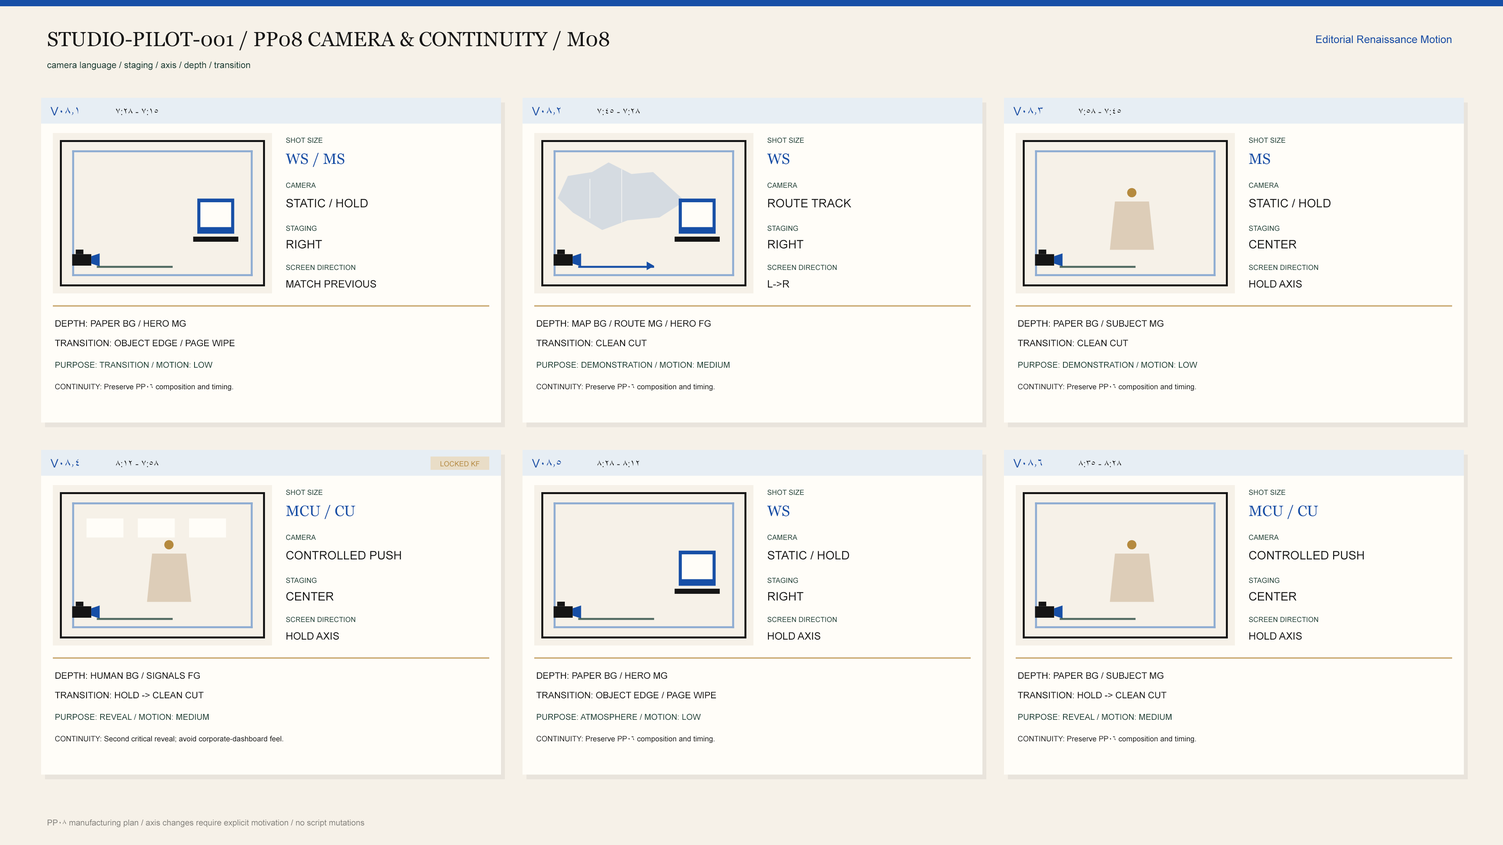
<style>
.page{position:relative;width:1503px;height:845px;background:#fffdf8}
.page>*{position:absolute;margin:0}
.t1{font:20.3px "Georgia";color:#151515}
.t2{font:10.6px "ArialMT";color:#174fa6}
.t3{font:9px "ArialMT";color:#173c32}
.t4{font:11.7px "ArialMT";color:#174fa6}
.t5{font:9.4px "ArialMT";color:#151515}
.t6{font:7px "ArialMT";color:#173c32}
.t7{font:14.9px "Georgia";color:#174fa6}
.t8{font:21.5px "ArialMT";color:#b58a3e}
.t9{font:11.7px "ArialMT";color:#151515}
.t10{font:10.2px "ArialMT";color:#151515}
.t11{font:9px "ArialMT";color:#151515}
.t12{font:8.2px "ArialMT";color:#173c32}
.t13{font:7.4px "ArialMT";color:#151515}
.t14{font:7px "ArialMT";color:#b58a3e}
.t15{font:8.2px "ArialMT";color:#817f7a}
</style>
<div class="page">
<p class="t1" style="left:48px;top:31px;width:561px;height:19px">STUDIO-PILOT-001 / PP08 CAMERA &amp; CONTINUITY / M08</p>
<p class="t2" style="left:1316px;top:35px;width:135px;height:8px">Editorial Renaissance Motion</p>
<p class="t3" style="left:47px;top:61px;width:203px;height:9px">camera language / staging / axis / depth / transition</p>
<p class="t4" style="left:50px;top:107px;width:28px;height:8px">V08.1</p>
<p class="t5" style="left:116px;top:108px;width:42px;height:7px">7:15 - 7:28</p>
<p class="t4" style="left:532px;top:107px;width:28px;height:8px">V08.2</p>
<p class="t5" style="left:597px;top:108px;width:43px;height:7px">7:28 - 7:45</p>
<p class="t4" style="left:1013px;top:107px;width:29px;height:8px">V08.3</p>
<p class="t5" style="left:1078px;top:108px;width:43px;height:7px">7:45 - 7:58</p>
<p class="t6" style="left:286px;top:137px;width:36px;height:6px">SHOT SIZE</p>
<p class="t6" style="left:767px;top:137px;width:37px;height:6px">SHOT SIZE</p>
<p class="t6" style="left:1249px;top:137px;width:36px;height:6px">SHOT SIZE</p>
<p class="t7" style="left:286px;top:153px;width:58px;height:14px">WS / MS</p>
<p class="t7" style="left:767px;top:153px;width:22px;height:11px">WS</p>
<p class="t7" style="left:1249px;top:153px;width:21px;height:11px">MS</p>
<p class="t6" style="left:286px;top:182px;width:30px;height:6px">CAMERA</p>
<p class="t6" style="left:767px;top:182px;width:30px;height:6px">CAMERA</p>
<p class="t6" style="left:1249px;top:182px;width:29px;height:6px">CAMERA</p>
<p class="t8" style="left:1127px;top:188px;width:9px;height:10px">●</p>
<p class="t9" style="left:286px;top:199px;width:82px;height:9px">STATIC / HOLD</p>
<p class="t9" style="left:768px;top:199px;width:83px;height:9px">ROUTE TRACK</p>
<p class="t9" style="left:1249px;top:199px;width:81px;height:9px">STATIC / HOLD</p>
<p class="t6" style="left:286px;top:225px;width:31px;height:6px">STAGING</p>
<p class="t6" style="left:767px;top:225px;width:31px;height:6px">STAGING</p>
<p class="t6" style="left:1249px;top:225px;width:30px;height:6px">STAGING</p>
<p class="t9" style="left:286px;top:240px;width:36px;height:9px">RIGHT</p>
<p class="t9" style="left:768px;top:240px;width:35px;height:9px">RIGHT</p>
<p class="t9" style="left:1249px;top:240px;width:47px;height:9px">CENTER</p>
<p class="t6" style="left:286px;top:265px;width:69px;height:5px">SCREEN DIRECTION</p>
<p class="t6" style="left:767px;top:265px;width:70px;height:5px">SCREEN DIRECTION</p>
<p class="t6" style="left:1249px;top:265px;width:69px;height:5px">SCREEN DIRECTION</p>
<p class="t10" style="left:286px;top:280px;width:90px;height:8px">MATCH PREVIOUS</p>
<p class="t10" style="left:768px;top:280px;width:21px;height:8px">L-&gt;R</p>
<p class="t10" style="left:1249px;top:280px;width:52px;height:8px">HOLD AXIS</p>
<p class="t11" style="left:55px;top:320px;width:131px;height:7px">DEPTH: PAPER BG / HERO MG</p>
<p class="t11" style="left:536px;top:320px;width:175px;height:7px">DEPTH: MAP BG / ROUTE MG / HERO FG</p>
<p class="t11" style="left:1018px;top:320px;width:145px;height:7px">DEPTH: PAPER BG / SUBJECT MG</p>
<p class="t11" style="left:55px;top:340px;width:180px;height:7px">TRANSITION: OBJECT EDGE / PAGE WIPE</p>
<p class="t11" style="left:536px;top:340px;width:110px;height:7px">TRANSITION: CLEAN CUT</p>
<p class="t11" style="left:1017px;top:340px;width:111px;height:7px">TRANSITION: CLEAN CUT</p>
<p class="t12" style="left:55px;top:362px;width:157px;height:6px">PURPOSE: TRANSITION / MOTION: LOW</p>
<p class="t12" style="left:536px;top:362px;width:193px;height:6px">PURPOSE: DEMONSTRATION / MOTION: MEDIUM</p>
<p class="t12" style="left:1018px;top:362px;width:179px;height:6px">PURPOSE: DEMONSTRATION / MOTION: LOW</p>
<p class="t13" style="left:55px;top:384px;width:178px;height:7px">CONTINUITY: Preserve PP06 composition and timing.</p>
<p class="t13" style="left:536px;top:384px;width:179px;height:7px">CONTINUITY: Preserve PP06 composition and timing.</p>
<p class="t13" style="left:1018px;top:384px;width:178px;height:7px">CONTINUITY: Preserve PP06 composition and timing.</p>
<p class="t4" style="left:50px;top:459px;width:29px;height:9px">V08.4</p>
<p class="t5" style="left:116px;top:460px;width:42px;height:7px">7:58 - 8:12</p>
<p class="t14" style="left:440px;top:461px;width:39px;height:6px">LOCKED KF</p>
<p class="t4" style="left:532px;top:459px;width:29px;height:9px">V08.5</p>
<p class="t5" style="left:597px;top:460px;width:42px;height:7px">8:12 - 8:28</p>
<p class="t4" style="left:1013px;top:459px;width:29px;height:9px">V08.6</p>
<p class="t5" style="left:1078px;top:460px;width:43px;height:7px">8:28 - 8:35</p>
<p class="t6" style="left:286px;top:490px;width:36px;height:5px">SHOT SIZE</p>
<p class="t6" style="left:767px;top:490px;width:37px;height:5px">SHOT SIZE</p>
<p class="t6" style="left:1249px;top:490px;width:36px;height:5px">SHOT SIZE</p>
<p class="t7" style="left:286px;top:505px;width:69px;height:14px">MCU / CU</p>
<p class="t7" style="left:767px;top:506px;width:22px;height:11px">WS</p>
<p class="t7" style="left:1249px;top:505px;width:69px;height:14px">MCU / CU</p>
<p class="t8" style="left:164px;top:540px;width:10px;height:10px">●</p>
<p class="t6" style="left:286px;top:535px;width:30px;height:5px">CAMERA</p>
<p class="t6" style="left:767px;top:535px;width:30px;height:5px">CAMERA</p>
<p class="t8" style="left:1127px;top:540px;width:9px;height:10px">●</p>
<p class="t6" style="left:1249px;top:535px;width:29px;height:5px">CAMERA</p>
<p class="t9" style="left:286px;top:551px;width:115px;height:9px">CONTROLLED PUSH</p>
<p class="t9" style="left:767px;top:551px;width:82px;height:9px">STATIC / HOLD</p>
<p class="t9" style="left:1249px;top:551px;width:115px;height:9px">CONTROLLED PUSH</p>
<p class="t6" style="left:286px;top:578px;width:31px;height:5px">STAGING</p>
<p class="t6" style="left:767px;top:578px;width:31px;height:5px">STAGING</p>
<p class="t6" style="left:1249px;top:578px;width:30px;height:5px">STAGING</p>
<p class="t9" style="left:286px;top:592px;width:47px;height:9px">CENTER</p>
<p class="t9" style="left:768px;top:592px;width:35px;height:9px">RIGHT</p>
<p class="t9" style="left:1249px;top:592px;width:47px;height:9px">CENTER</p>
<p class="t6" style="left:286px;top:617px;width:69px;height:6px">SCREEN DIRECTION</p>
<p class="t6" style="left:767px;top:617px;width:70px;height:6px">SCREEN DIRECTION</p>
<p class="t6" style="left:1249px;top:617px;width:69px;height:6px">SCREEN DIRECTION</p>
<p class="t10" style="left:286px;top:632px;width:53px;height:8px">HOLD AXIS</p>
<p class="t10" style="left:768px;top:632px;width:52px;height:8px">HOLD AXIS</p>
<p class="t10" style="left:1249px;top:632px;width:52px;height:8px">HOLD AXIS</p>
<p class="t11" style="left:55px;top:672px;width:145px;height:7px">DEPTH: HUMAN BG / SIGNALS FG</p>
<p class="t11" style="left:536px;top:672px;width:131px;height:7px">DEPTH: PAPER BG / HERO MG</p>
<p class="t11" style="left:1018px;top:672px;width:145px;height:7px">DEPTH: PAPER BG / SUBJECT MG</p>
<p class="t11" style="left:55px;top:692px;width:148px;height:7px">TRANSITION: HOLD -&gt; CLEAN CUT</p>
<p class="t11" style="left:536px;top:692px;width:180px;height:7px">TRANSITION: OBJECT EDGE / PAGE WIPE</p>
<p class="t11" style="left:1017px;top:692px;width:149px;height:7px">TRANSITION: HOLD -&gt; CLEAN CUT</p>
<p class="t12" style="left:55px;top:714px;width:154px;height:6px">PURPOSE: REVEAL / MOTION: MEDIUM</p>
<p class="t12" style="left:536px;top:714px;width:164px;height:6px">PURPOSE: ATMOSPHERE / MOTION: LOW</p>
<p class="t12" style="left:1018px;top:714px;width:153px;height:6px">PURPOSE: REVEAL / MOTION: MEDIUM</p>
<p class="t13" style="left:55px;top:736px;width:228px;height:7px">CONTINUITY: Second critical reveal; avoid corporate-dashboard feel.</p>
<p class="t13" style="left:536px;top:736px;width:179px;height:7px">CONTINUITY: Preserve PP06 composition and timing.</p>
<p class="t13" style="left:1018px;top:736px;width:178px;height:7px">CONTINUITY: Preserve PP06 composition and timing.</p>
<p class="t15" style="left:47px;top:819px;width:317px;height:9px">PP08 manufacturing plan / axis changes require explicit motivation / no script mutations</p>
</div>
